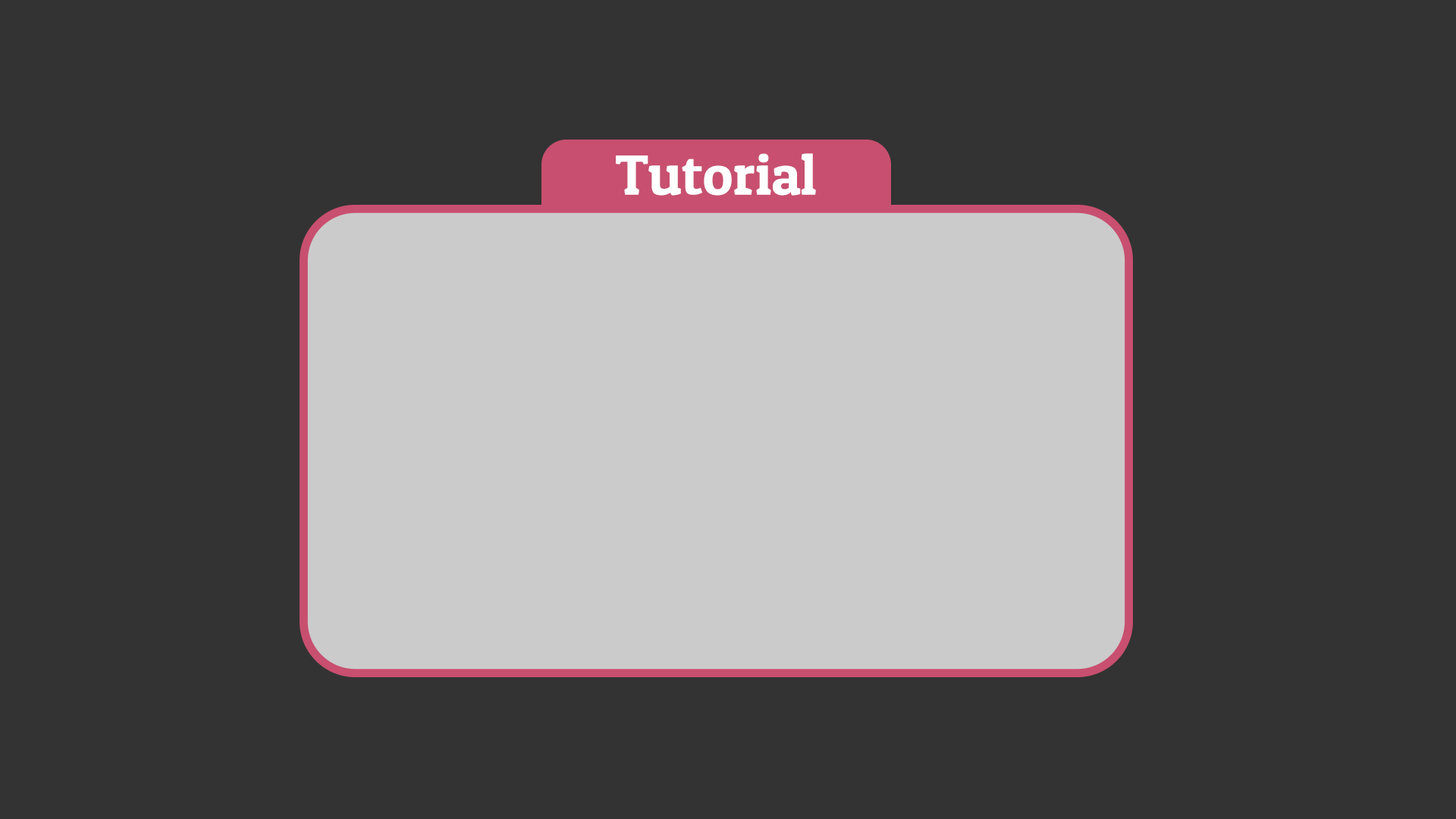
<style>
.page{position:relative;width:1456px;height:819px;background:#333333}
.page>*{position:absolute;margin:0}
.t1{font:56.9px "PatuaOne-Regular";color:#ffffff}
</style>
<div class="page">
<p class="t1" style="left:616px;top:153px;width:200px;height:43px">Tutorial</p>
</div>
